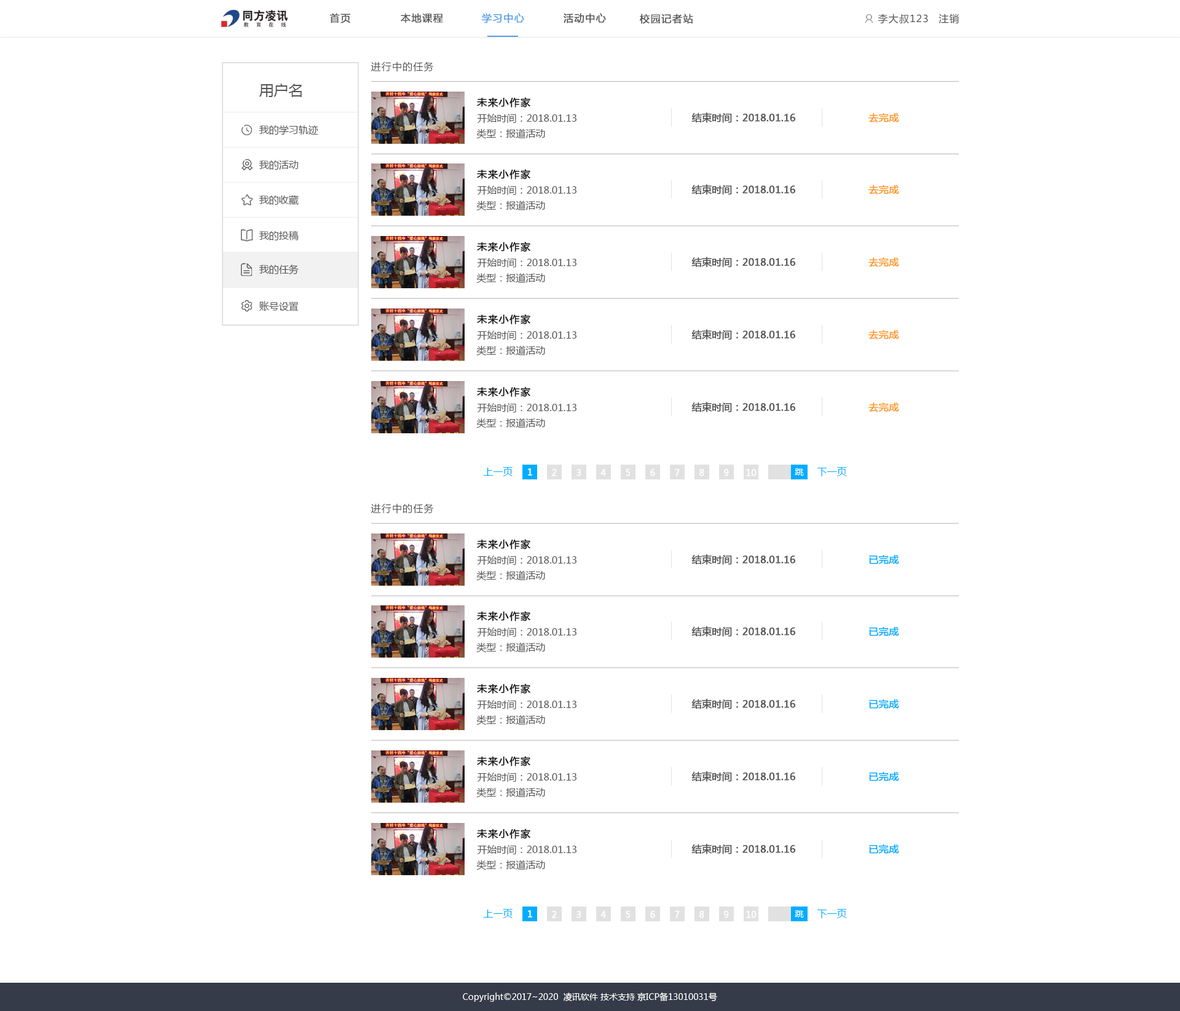
<style>
.page{position:relative;width:1180px;height:1011px;background:#ffffff}
.page>*{position:absolute;margin:0}
.t1{font:9.8px "MicrosoftYaHei";letter-spacing:0.075em;color:#555555;font-weight:bold}
.t2{font:9.8px "MicrosoftYaHei";letter-spacing:0.075em;color:#54a0e6;font-weight:bold}
.t3{font:9.8px "MicrosoftYaHei";letter-spacing:0.075em;color:#555555}
.t4{font:14.7px "MicrosoftYaHei";color:#555555;text-transform:uppercase}
.t5{font:9.8px "MicrosoftYaHei";letter-spacing:0.075em;color:#181617;font-weight:bold}
.t6{font:9.8px "MicrosoftYaHei";color:#555555}
.t7{font:9.8px "MicrosoftYaHei";color:#555555;font-weight:bold}
.t8{font:9.8px "MicrosoftYaHei";color:#fb9b2a;font-weight:bold}
.t9{font:9.8px "MicrosoftYaHei";color:#00adff}
.t10{font:8.6px "MicrosoftYaHei";color:#ffffff;font-weight:bold}
.t11{font:8.6px "MicrosoftYaHei";color:#ffffff}
.t12{font:9.8px "MicrosoftYaHei";color:#00adff;font-weight:bold}
</style>
<div class="page">
<p class="t1" style="left:329px;top:13px;width:21px;height:10px">首页</p>
<p class="t1" style="left:401px;top:13px;width:42px;height:10px">本地课程</p>
<p class="t2" style="left:482px;top:13px;width:42px;height:10px">学习中心</p>
<p class="t1" style="left:563px;top:13px;width:43px;height:10px">活动中心</p>
<p class="t1" style="left:640px;top:14px;width:53px;height:10px">校园记者站</p>
<p class="t3" style="left:877px;top:14px;width:51px;height:10px">李大叔123</p>
<p class="t3" style="left:938px;top:14px;width:21px;height:9px">注销</p>
<p class="t3" style="left:371px;top:61px;width:63px;height:11px">进行中的任务</p>
<p class="t4" style="left:259px;top:84px;width:43px;height:13px">用户名</p>
<p class="t5" style="left:477px;top:97px;width:53px;height:11px">未来小作家</p>
<p class="t6" style="left:477px;top:114px;width:99px;height:9px">开始时间：2018.01.13</p>
<p class="t7" style="left:691px;top:112px;width:105px;height:11px">结束时间：2018.01.16</p>
<p class="t8" style="left:868px;top:113px;width:31px;height:10px">去完成</p>
<p class="t6" style="left:259px;top:125px;width:59px;height:10px">我的学习轨迹</p>
<p class="t6" style="left:476px;top:128px;width:69px;height:11px">类型：报道活动</p>
<p class="t6" style="left:259px;top:160px;width:40px;height:10px">我的活动</p>
<p class="t5" style="left:477px;top:169px;width:53px;height:10px">未来小作家</p>
<p class="t6" style="left:477px;top:186px;width:99px;height:9px">开始时间：2018.01.13</p>
<p class="t7" style="left:691px;top:184px;width:105px;height:11px">结束时间：2018.01.16</p>
<p class="t8" style="left:868px;top:185px;width:31px;height:10px">去完成</p>
<p class="t6" style="left:259px;top:195px;width:40px;height:10px">我的收藏</p>
<p class="t6" style="left:476px;top:200px;width:69px;height:11px">类型：报道活动</p>
<p class="t6" style="left:259px;top:230px;width:40px;height:10px">我的投稿</p>
<p class="t5" style="left:477px;top:241px;width:53px;height:11px">未来小作家</p>
<p class="t7" style="left:691px;top:257px;width:105px;height:10px">结束时间：2018.01.16</p>
<p class="t8" style="left:868px;top:257px;width:31px;height:10px">去完成</p>
<p class="t6" style="left:259px;top:264px;width:40px;height:11px">我的任务</p>
<p class="t6" style="left:477px;top:258px;width:99px;height:9px">开始时间：2018.01.13</p>
<p class="t6" style="left:476px;top:273px;width:69px;height:10px">类型：报道活动</p>
<p class="t6" style="left:259px;top:301px;width:40px;height:10px">账号设置</p>
<p class="t5" style="left:477px;top:314px;width:53px;height:10px">未来小作家</p>
<p class="t7" style="left:691px;top:329px;width:105px;height:11px">结束时间：2018.01.16</p>
<p class="t8" style="left:868px;top:330px;width:31px;height:10px">去完成</p>
<p class="t6" style="left:477px;top:331px;width:99px;height:9px">开始时间：2018.01.13</p>
<p class="t6" style="left:476px;top:345px;width:69px;height:11px">类型：报道活动</p>
<p class="t5" style="left:477px;top:386px;width:53px;height:11px">未来小作家</p>
<p class="t7" style="left:691px;top:402px;width:105px;height:10px">结束时间：2018.01.16</p>
<p class="t6" style="left:477px;top:403px;width:99px;height:9px">开始时间：2018.01.13</p>
<p class="t8" style="left:868px;top:402px;width:31px;height:10px">去完成</p>
<p class="t6" style="left:476px;top:418px;width:69px;height:10px">类型：报道活动</p>
<p class="t9" style="left:483px;top:467px;width:29px;height:9px">上一页</p>
<p class="t10" style="left:528px;top:468px;width:4px;height:8px">1</p>
<p class="t10" style="left:552px;top:469px;width:5px;height:7px">2</p>
<p class="t10" style="left:576px;top:469px;width:5px;height:7px">3</p>
<p class="t10" style="left:600px;top:469px;width:6px;height:7px">4</p>
<p class="t10" style="left:626px;top:469px;width:4px;height:7px">5</p>
<p class="t10" style="left:650px;top:469px;width:5px;height:7px">6</p>
<p class="t10" style="left:675px;top:469px;width:5px;height:7px">7</p>
<p class="t10" style="left:699px;top:469px;width:5px;height:7px">8</p>
<p class="t10" style="left:724px;top:469px;width:5px;height:7px">9</p>
<p class="t10" style="left:746px;top:469px;width:10px;height:7px">10</p>
<p class="t11" style="left:794px;top:468px;width:10px;height:8px">跳</p>
<p class="t9" style="left:817px;top:467px;width:30px;height:9px">下一页</p>
<p class="t3" style="left:371px;top:503px;width:63px;height:11px">进行中的任务</p>
<p class="t5" style="left:477px;top:539px;width:53px;height:10px">未来小作家</p>
<p class="t6" style="left:477px;top:555px;width:99px;height:10px">开始时间：2018.01.13</p>
<p class="t7" style="left:691px;top:554px;width:105px;height:11px">结束时间：2018.01.16</p>
<p class="t12" style="left:869px;top:555px;width:30px;height:9px">已完成</p>
<p class="t6" style="left:476px;top:570px;width:69px;height:11px">类型：报道活动</p>
<p class="t5" style="left:477px;top:611px;width:53px;height:10px">未来小作家</p>
<p class="t6" style="left:477px;top:627px;width:99px;height:10px">开始时间：2018.01.13</p>
<p class="t7" style="left:691px;top:626px;width:105px;height:11px">结束时间：2018.01.16</p>
<p class="t12" style="left:869px;top:627px;width:30px;height:9px">已完成</p>
<p class="t6" style="left:476px;top:642px;width:69px;height:11px">类型：报道活动</p>
<p class="t5" style="left:477px;top:683px;width:53px;height:11px">未来小作家</p>
<p class="t6" style="left:477px;top:700px;width:99px;height:9px">开始时间：2018.01.13</p>
<p class="t7" style="left:691px;top:699px;width:105px;height:10px">结束时间：2018.01.16</p>
<p class="t12" style="left:869px;top:699px;width:30px;height:9px">已完成</p>
<p class="t6" style="left:476px;top:715px;width:69px;height:10px">类型：报道活动</p>
<p class="t5" style="left:477px;top:756px;width:53px;height:10px">未来小作家</p>
<p class="t6" style="left:477px;top:772px;width:99px;height:10px">开始时间：2018.01.13</p>
<p class="t7" style="left:691px;top:771px;width:105px;height:11px">结束时间：2018.01.16</p>
<p class="t12" style="left:869px;top:772px;width:30px;height:9px">已完成</p>
<p class="t6" style="left:476px;top:787px;width:69px;height:11px">类型：报道活动</p>
<p class="t5" style="left:477px;top:828px;width:53px;height:11px">未来小作家</p>
<p class="t6" style="left:477px;top:845px;width:99px;height:9px">开始时间：2018.01.13</p>
<p class="t7" style="left:691px;top:844px;width:105px;height:10px">结束时间：2018.01.16</p>
<p class="t12" style="left:869px;top:844px;width:30px;height:9px">已完成</p>
<p class="t6" style="left:476px;top:860px;width:69px;height:10px">类型：报道活动</p>
<p class="t9" style="left:483px;top:909px;width:29px;height:9px">上一页</p>
<p class="t10" style="left:528px;top:910px;width:4px;height:7px">1</p>
<p class="t10" style="left:552px;top:911px;width:5px;height:7px">2</p>
<p class="t10" style="left:576px;top:911px;width:5px;height:7px">3</p>
<p class="t10" style="left:600px;top:911px;width:6px;height:7px">4</p>
<p class="t10" style="left:626px;top:911px;width:4px;height:7px">5</p>
<p class="t10" style="left:650px;top:911px;width:5px;height:7px">6</p>
<p class="t10" style="left:675px;top:911px;width:5px;height:7px">7</p>
<p class="t10" style="left:699px;top:911px;width:5px;height:7px">8</p>
<p class="t10" style="left:724px;top:911px;width:5px;height:7px">9</p>
<p class="t10" style="left:746px;top:911px;width:10px;height:7px">10</p>
<p class="t11" style="left:794px;top:910px;width:10px;height:7px">跳</p>
<p class="t9" style="left:817px;top:909px;width:30px;height:9px">下一页</p>
<p class="t11" style="left:463px;top:992px;width:254px;height:10px">Copyright©2017~2020  凌讯软件 技术支持 京ICP备13010031号</p>
</div>
